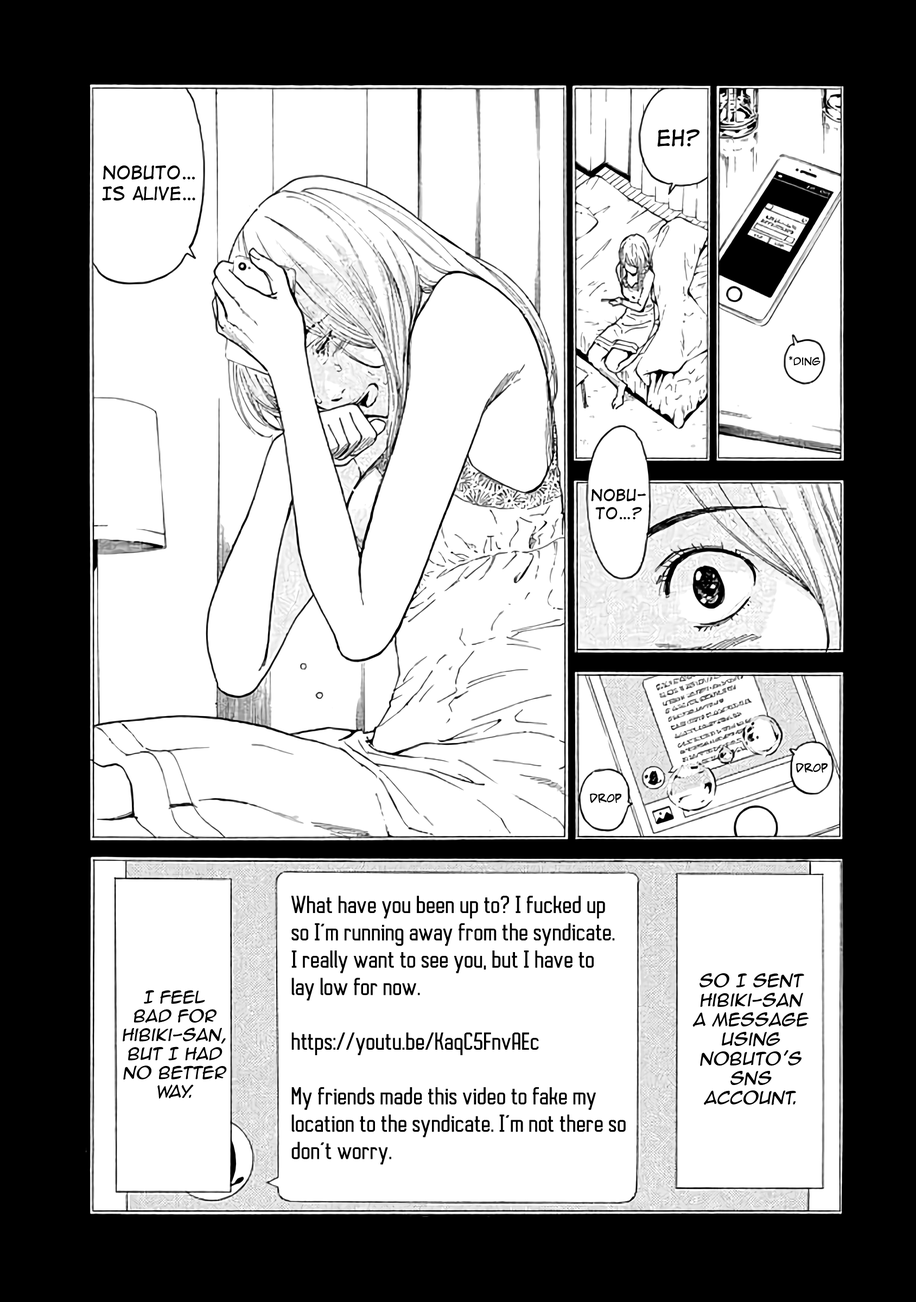
<style>
.page{position:relative;width:916px;height:1302px;background:#ffffff}
.page>*{position:absolute;margin:0}
.t1{font:21.2px "DigitalStrip";color:#000000}
.t2{font:17.4px "DigitalStrip";color:#000000}
.t3{font:9.8px "AnimeAce2.0BB";color:#000000}
.t4{font:15.2px "DigitalStrip";color:#000000}
.t5{font:11.9px "AdamWarrenpro";color:#000000}
.t6{font:22.8px "AutobusBold";color:#000000}
.t7{font:16.3px "AnimeAce2.0BB";color:#000000;font-style:italic}
.t8{font:15.7px "AnimeAce2.0BB";color:#000000;font-style:italic}
</style>
<div class="page">
<p class="t1" style="left:657px;top:129px;width:42px;height:18px">Eh?</p>
<p class="t2" style="left:102px;top:165px;width:93px;height:36px;text-align:center">Nobuto…<br>Is alive…</p>
<p class="t3" style="left:789px;top:356px;width:31px;height:10px">*ding</p>
<p class="t4" style="left:591px;top:489px;width:55px;height:31px;text-align:center">Nobu-<br>to…?</p>
<p class="t5" style="left:796px;top:763px;width:31px;height:10px">Drop</p>
<p class="t5" style="left:590px;top:793px;width:31px;height:10px">Drop</p>
<p class="t6" style="left:291px;top:896px;width:335px;height:269px">What have you been up to? I fucked up<br>so I’m running away from the syndicate.<br>I really want to see you, but I have to<br>lay low for now.<br><br>https://youtu.be/KaqC5FnvAEc<br><br>My friends made this video to fake my<br>location to the syndicate. I’m not there so<br>don’t worry.</p>
<p class="t7" style="left:692px;top:973px;width:116px;height:132px;text-align:center">So I sent<br>Hibiki-san<br>a message<br>using<br>Nobuto’s<br>SNS<br>account.</p>
<p class="t8" style="left:123px;top:990px;width:104px;height:109px;text-align:center">I feel<br>bad for<br>Hibiki-san,<br>but I had<br>no better<br>way.</p>
</div>
